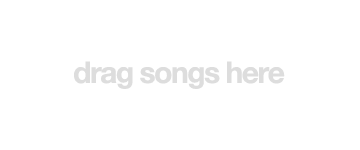
<style>
.page{position:relative;width:360px;height:150px;background:#ffffff}
.page>*{position:absolute;margin:0}
.t1{font:30px "HelveticaNeue-Bold";letter-spacing:-0.05em;color:#dddddd}
</style>
<div class="page">
<p class="t1" style="left:74px;top:61px;width:211px;height:28px">drag songs here</p>
</div>
